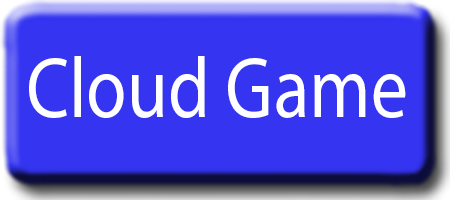
<style>
.page{position:relative;width:450px;height:200px;background:#3434f1}
.page>*{position:absolute;margin:0}
.t1{font:20.8px "MyriadPro-Regular";color:#ffffff;scale:0.86 1}
</style>
<div class="page">
<p class="t1" style="left:29px;top:56px;width:377px;height:62px">Cloud Game</p>
</div>
